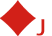
<style>
.page{position:relative;width:52px;height:36px;background:#ffffff}
.page>*{position:absolute;margin:0}
.t1{font:23.4px "MyriadPro-Regular";letter-spacing:-0.1em;color:#d22018;font-weight:bold}
</style>
<div class="page">
<p class="t1" style="left:36px;top:19px;width:9px;height:17px">J</p>
</div>
